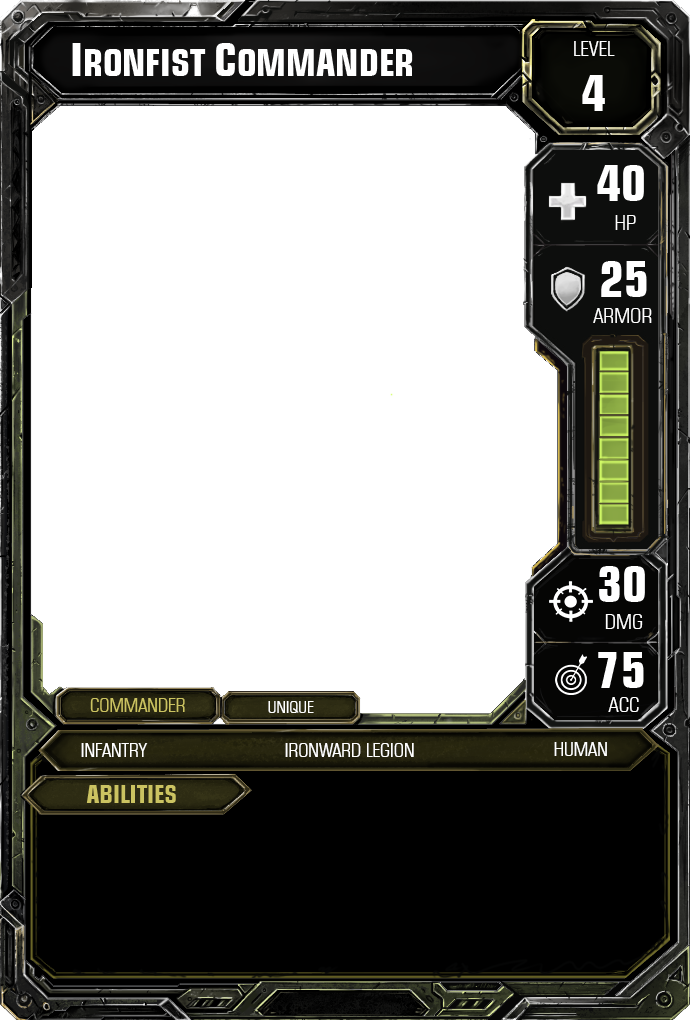
<style>
.page{position:relative;width:690px;height:1020px;background:#ffffff}
.page>*{position:absolute;margin:0}
.t1{font:20.8px "Square721BT-RomanCondensed";color:#ffffff}
.t2{font:37.5px "Square721BT-BoldCondensed";color:#ffffff}
.t3{font:45.8px "Square721BT-BoldCondensed";color:#ffffff}
.t4{font:50px "Square721BT-BoldCondensed";color:#ffffff}
.t5{font:18.8px "Square721BT-RomanCondensed";color:#ccc361}
.t6{font:16.7px "Square721BT-RomanCondensed";color:#ffffff}
.t7{font:18.8px "Square721BT-RomanCondensed";color:#ffffff}
.t8{font:25px "Square721BT-BoldCondensed";color:#ccc361}
</style>
<div class="page">
<p class="t1" style="left:574px;top:41px;width:41px;height:15px">LEVEL</p>
<p class="t2" style="left:72px;top:43px;width:341px;height:33px"><span class="t3">I</span>RONFIST <span class="t3">C</span>OMMANDER</p>
<p class="t4" style="left:582px;top:75px;width:23px;height:36px">4</p>
<p class="t4" style="left:597px;top:165px;width:47px;height:36px">40</p>
<p class="t1" style="left:615px;top:215px;width:21px;height:15px">HP</p>
<p class="t4" style="left:601px;top:261px;width:46px;height:36px">25</p>
<p class="t1" style="left:593px;top:308px;width:59px;height:15px">ARMOR</p>
<p class="t4" style="left:599px;top:566px;width:46px;height:36px">30</p>
<p class="t1" style="left:605px;top:614px;width:38px;height:15px">DMG</p>
<p class="t4" style="left:598px;top:652px;width:46px;height:36px">75</p>
<p class="t5" style="left:90px;top:698px;width:95px;height:14px">COMMANDER</p>
<p class="t6" style="left:268px;top:701px;width:46px;height:12px">UNIQUE</p>
<p class="t1" style="left:608px;top:697px;width:31px;height:15px">ACC</p>
<p class="t7" style="left:81px;top:743px;width:67px;height:14px">INFANTRY</p>
<p class="t7" style="left:285px;top:743px;width:129px;height:14px">IRONWARD LEGION</p>
<p class="t7" style="left:554px;top:742px;width:53px;height:14px">HUMAN</p>
<p class="t8" style="left:86px;top:785px;width:90px;height:18px">ABILITIES</p>
</div>
